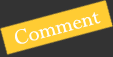
<style>
.page{position:relative;width:113px;height:57px;background:#333333}
.page>*{position:absolute;margin:0}
.t1{font:24px "Perpetua";color:#fdfdfd}
</style>
<div class="page">
<p class="t1" style="left:15px;top:12px;width:86px;height:32px;rotate:-15deg">Comment</p>
</div>
